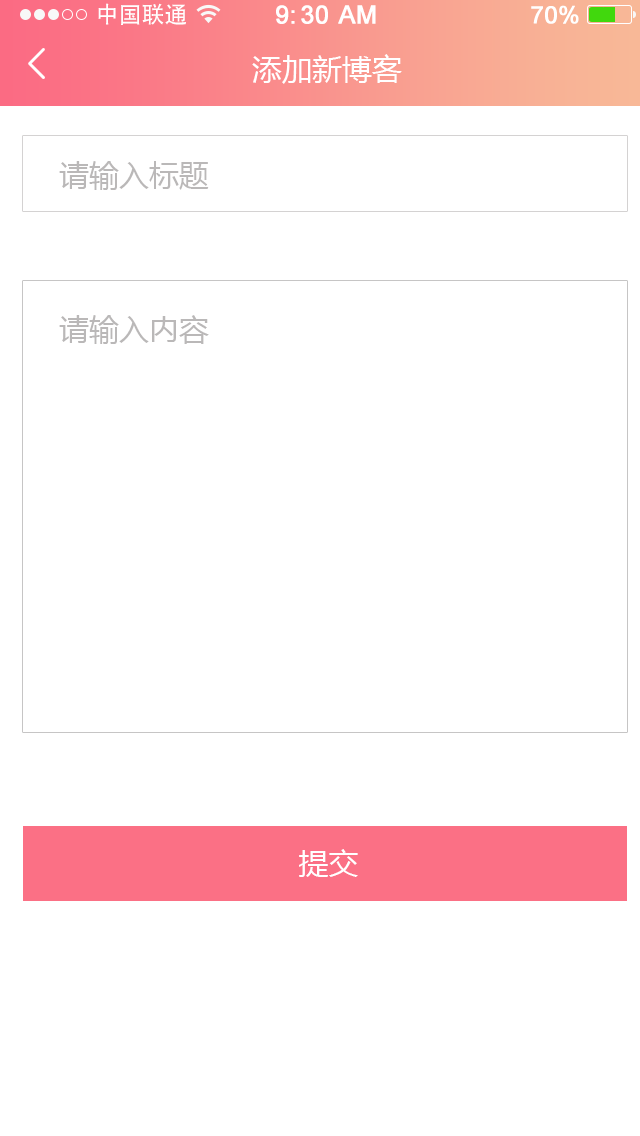
<style>
.page{position:relative;width:640px;height:1136px;background:#ffffff}
.page>*{position:absolute;margin:0}
.t1{font:23px "AdobeHeitiStd-Regular";color:#ffffff}
.t2{font:25px "ArialMT";color:#ffffff;font-weight:bold}
.t3{font:24px "ArialMT";color:#ffffff;font-weight:bold}
.t4{font:30px "MicrosoftYaHei";color:#ffffff}
.t5{font:30px "MicrosoftYaHei";color:#bab8b8}
</style>
<div class="page">
<p class="t1" style="left:98px;top:3px;width:88px;height:22px">中国联通</p>
<p class="t2" style="left:276px;top:5px;width:100px;height:19px">9:30 AM</p>
<p class="t3" style="left:531px;top:5px;width:48px;height:19px">70%</p>
<p class="t4" style="left:252px;top:54px;width:150px;height:30px">添加新博客</p>
<p class="t5" style="left:59px;top:161px;width:150px;height:29px">请输入标题</p>
<p class="t5" style="left:59px;top:315px;width:150px;height:29px">请输入内容</p>
<p class="t4" style="left:299px;top:849px;width:59px;height:28px">提交</p>
</div>
